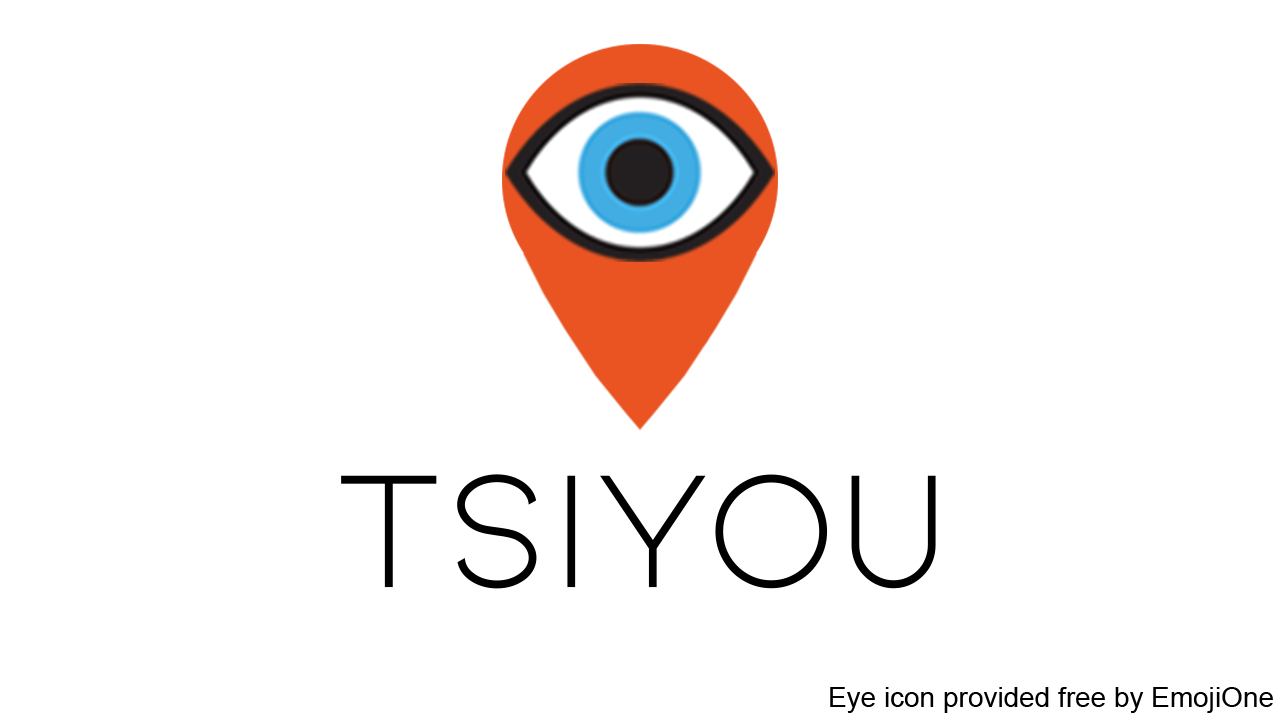
<style>
.page{position:relative;width:1280px;height:720px;background:#ffffff}
.page>*{position:absolute;margin:0}
.t1{font:171.1px "Kiona-Regular";color:#000000}
.t2{font:27.9px "ArialMT";color:#000000}
</style>
<div class="page">
<p class="t1" style="left:341px;top:474px;width:595px;height:115px">TsiYou</p>
<p class="t2" style="left:830px;top:687px;width:443px;height:26px">Eye icon provided free by EmojiOne</p>
</div>
